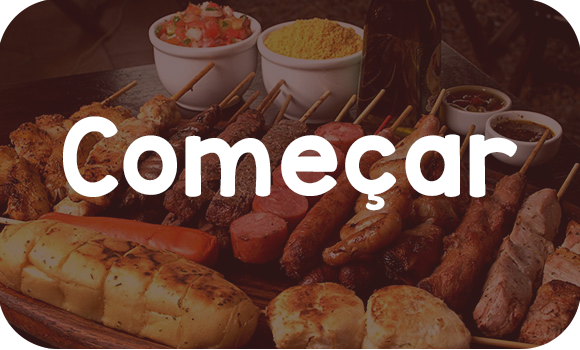
<style>
.page{position:relative;width:580px;height:350px}
.page>*{position:absolute;margin:0}
.t1{font:90px "KGRedHands";letter-spacing:0.025em;color:#ffffff}
</style>
<div class="page">
<p class="t1" style="left:63px;top:116px;width:454px;height:95px">Começar</p>
</div>
